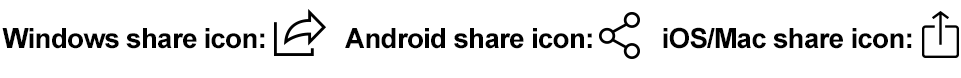
<style>
.page{position:relative;width:961px;height:78px;background:#ffffff}
.page>*{position:absolute;margin:0}
.t1{font:28px "Arial-BoldMT";letter-spacing:-0.03em;color:#000000}
</style>
<div class="page">
<p class="t1" style="left:2px;top:28px;width:263px;height:21px">Windows share icon:</p>
<p class="t1" style="left:345px;top:28px;width:247px;height:21px">Android share icon:</p>
<p class="t1" style="left:663px;top:27px;width:249px;height:22px">iOS/Mac share icon:</p>
</div>
